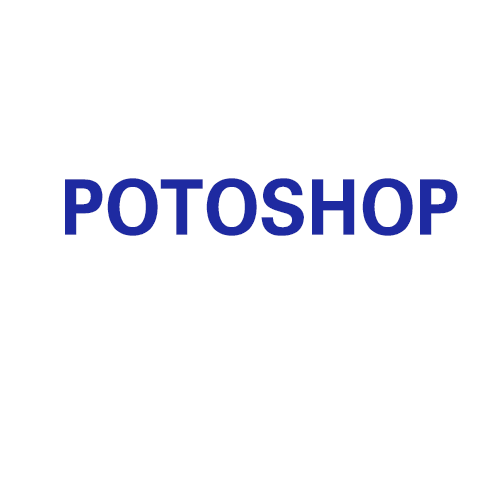
<style>
.page{position:relative;width:500px;height:500px;background:#ffffff}
.page>*{position:absolute;margin:0}
.t1{font:72px "ChosunBg";color:#1e2aa1}
</style>
<div class="page">
<p class="t1" style="left:65px;top:178px;width:393px;height:58px">POTOSHOP</p>
</div>
